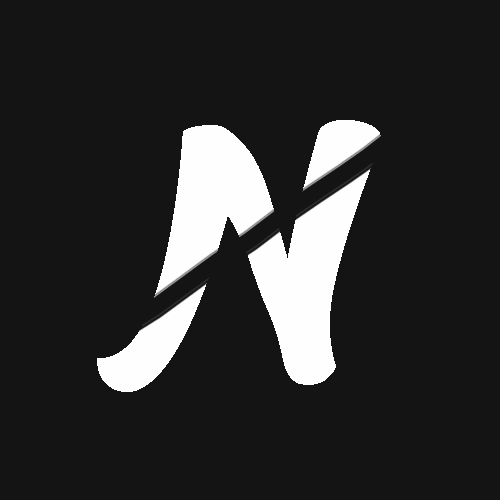
<style>
.page{position:relative;width:500px;height:500px;background:#141414}
.page>*{position:absolute;margin:0}
.t1{font:366.7px "Billyer";color:#fefefe;text-transform:uppercase}
</style>
<div class="page">
<p class="t1" style="left:97px;top:120px;width:284px;height:272px">N</p>
</div>
